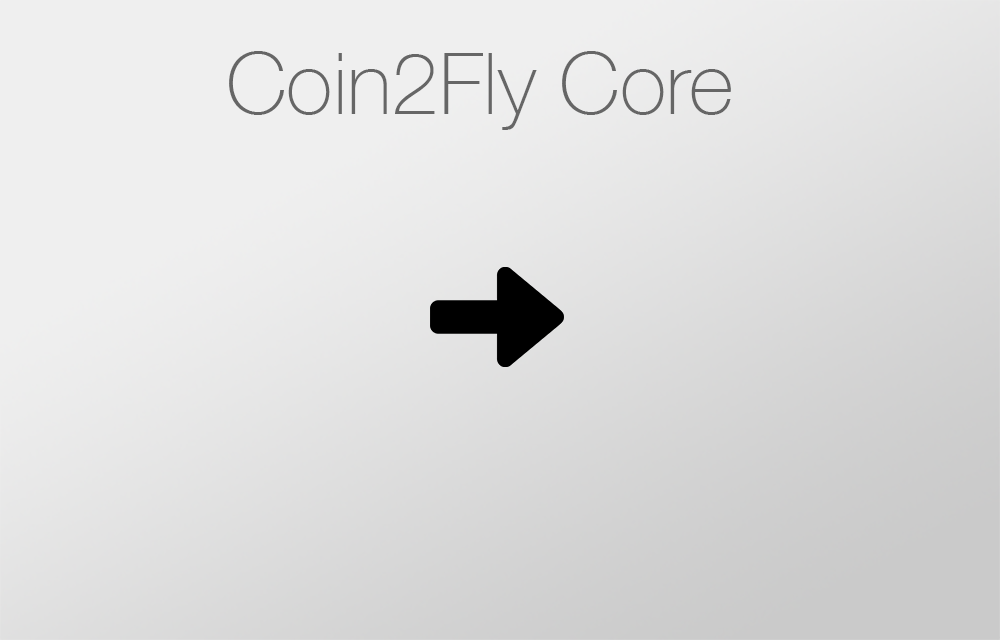
<style>
.page{position:relative;width:1000px;height:640px}
.page>*{position:absolute;margin:0}
.t1{font:85.7px "HelveticaNeue-Thin";color:#666666}
</style>
<div class="page">
<p class="t1" style="left:229px;top:51px;width:502px;height:79px">Coin2Fly Core</p>
</div>
